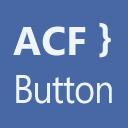
<style>
.page{position:relative;width:128px;height:128px;background:#4768a5}
.page>*{position:absolute;margin:0}
.t1{font:40px "Ebrima";letter-spacing:-0.03em;color:#eff4f8;scale:0.9 1}
.t2{font:40px "Ebrima-Bold";color:#eff4f8}
</style>
<div class="page">
<p class="t1" style="left:13px;top:23px;width:99px;height:81px"><span class="t2">ACF }<br></span>Button</p>
</div>
